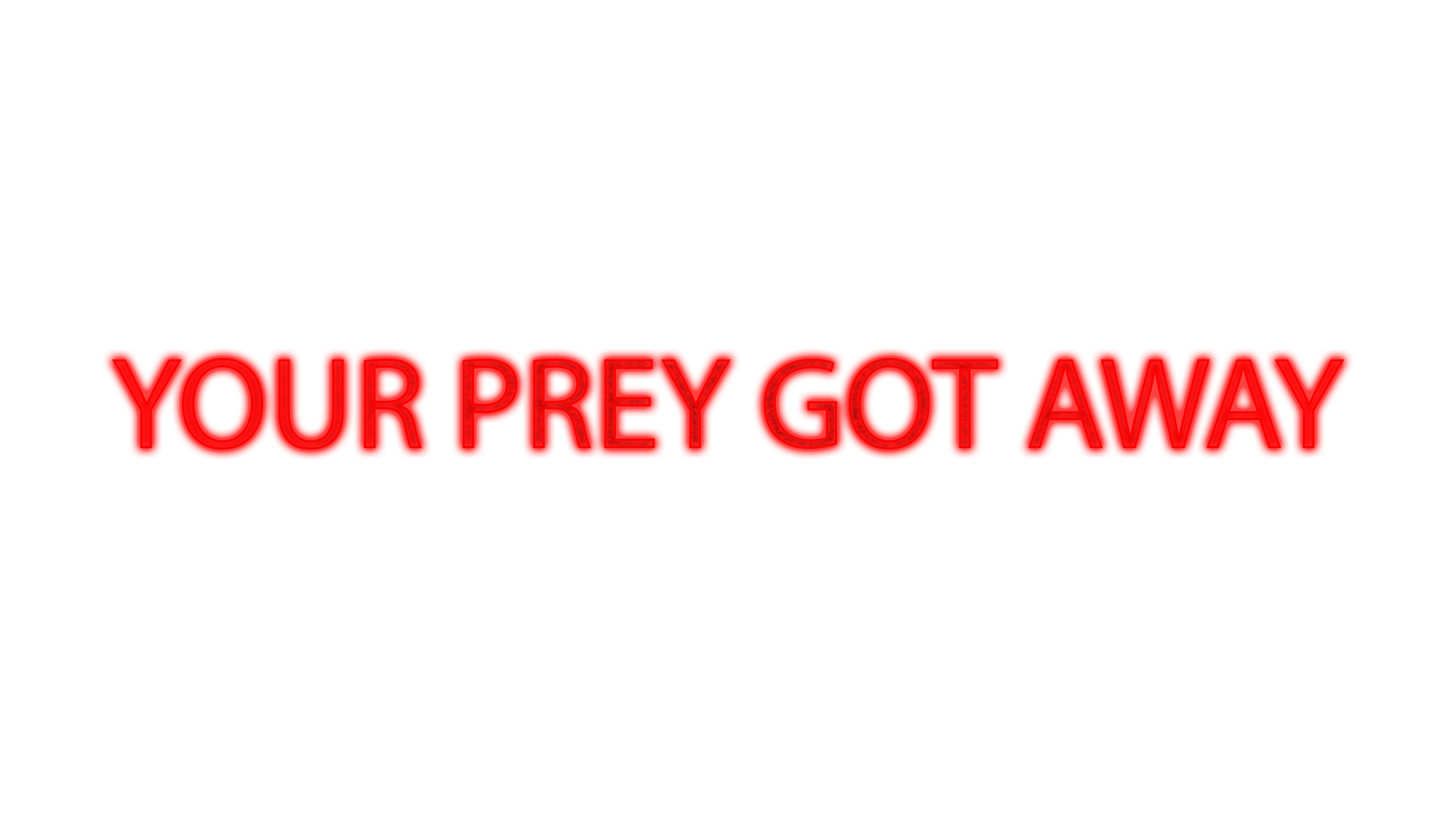
<style>
.page{position:relative;width:1456px;height:819px;background:#ffffff}
.page>*{position:absolute;margin:0}
.t1{font:132px "MyriadPro-Regular";color:#ff0000}
</style>
<div class="page">
<p class="t1" style="left:111px;top:358px;width:1234px;height:92px">YOUR PREY GOT AWAY</p>
</div>
